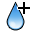
<style>
.page{position:relative;width:32px;height:32px;background:#ffffff}
.page>*{position:absolute;margin:0}
.t1{font:26.8px "ArialMT";color:#000000}
</style>
<div class="page">
<p class="t1" style="left:18px;top:2px;width:12px;height:12px">+</p>
</div>
